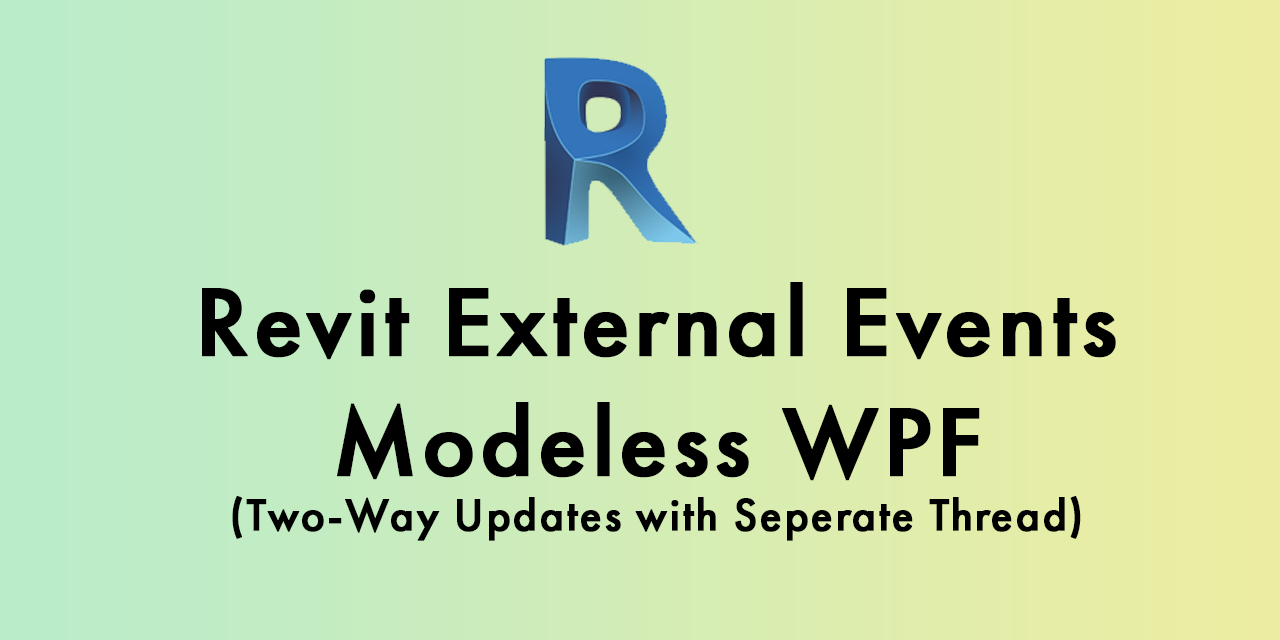
<style>
.page{position:relative;width:1280px;height:640px}
.page>*{position:absolute;margin:0}
.t1{font:45.8px "FuturaPT-Medium";letter-spacing:0.025em;color:#000000;font-weight:bold}
.t2{font:100px "FuturaPT-Medium";letter-spacing:0.025em;color:#000000;font-weight:bold}
</style>
<div class="page">
<p class="t1" style="left:202px;top:282px;width:914px;height:259px;text-align:center"><span class="t2">Revit External Events<br>Modeless WPF<br></span>(Two-Way Updates with Seperate Thread)</p>
</div>
